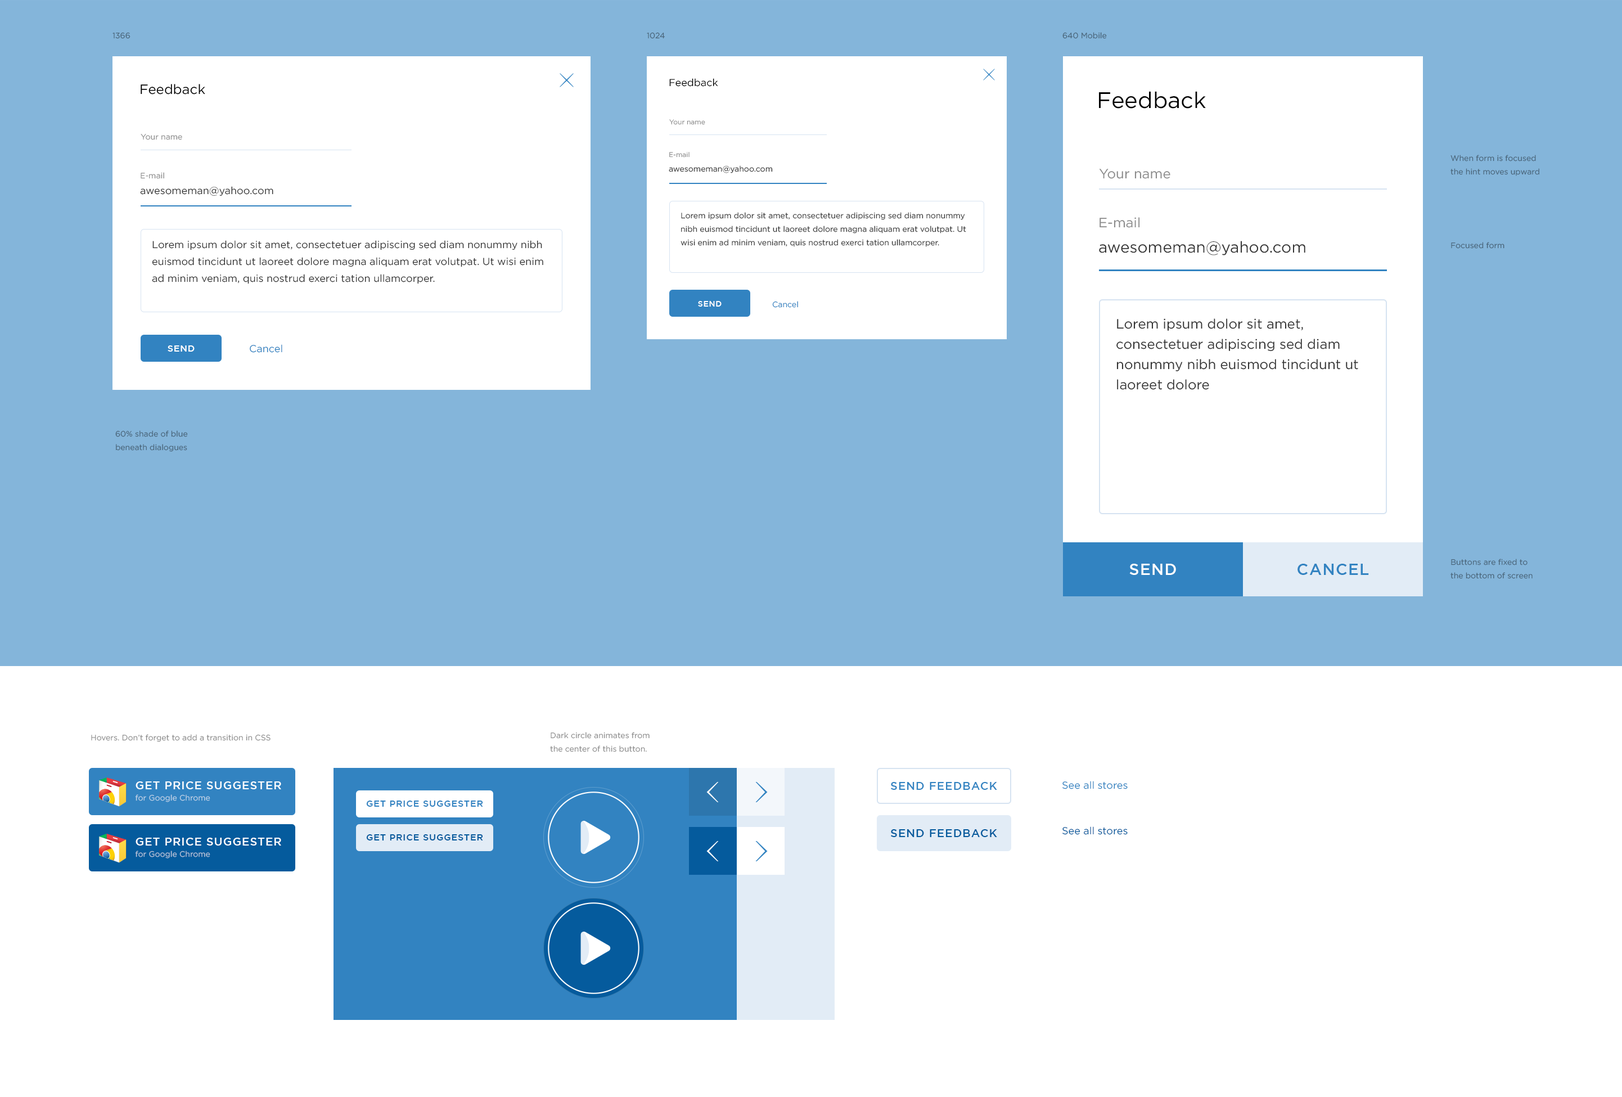
<style>
.page{position:relative;width:1622px;height:1097px;background:#ffffff}
.page>*{position:absolute;margin:0}
.t1{font:7.9px "GothamPro";color:#486377}
.t2{font:13.5px "GothamPro";color:#000000}
.t3{font:10.1px "GothamPro";color:#000000}
.t4{font:22.5px "GothamPro";color:#000000}
.t5{font:6.8px "GothamPro";color:#8b8b8b}
.t6{font:7.9px "GothamPro";color:#8b8b8b}
.t7{font:7.9px/13.5px "GothamPro";color:#486377}
.t8{font:7.9px "GothamPro";color:#333333}
.t9{font:13.5px "GothamPro";color:#8b8b8b}
.t10{font:10.1px "GothamPro";color:#333333}
.t11{font:7.9px/13.5px "GothamPro";color:#333333}
.t12{font:10.1px/16.9px "GothamPro";color:#333333}
.t13{font:15.8px "GothamPro";color:#333333}
.t14{font:7.9px "GothamPro-Medium";letter-spacing:0.05em;color:#ffffff;text-transform:uppercase}
.t15{font:7.9px "GothamPro";color:#3283c1}
.t16{font:13.5px/20.2px "GothamPro";color:#333333}
.t17{font:9px "GothamPro-Medium";letter-spacing:0.05em;color:#ffffff;text-transform:uppercase}
.t18{font:10.1px "GothamPro";color:#3283c1}
.t19{font:15.8px "GothamPro-Medium";letter-spacing:0.05em;color:#ffffff;text-transform:uppercase}
.t20{font:15.8px "GothamPro-Medium";letter-spacing:0.05em;color:#3283c1;text-transform:uppercase}
.t21{font:7.9px/13.5px "GothamPro";color:#8b8b8b}
.t22{font:11.2px "GothamPro-Medium";letter-spacing:0.05em;color:#ffffff;text-transform:uppercase}
.t23{font:11.2px "GothamPro-Medium";letter-spacing:0.05em;color:#3283c1;text-transform:uppercase}
.t24{font:7.9px "GothamPro";color:#bdd2e7}
.t25{font:9px "GothamPro-Medium";letter-spacing:0.05em;color:#3283c1;text-transform:uppercase}
.t26{font:11.2px "GothamPro-Medium";letter-spacing:0.05em;color:#055b9d;text-transform:uppercase}
.t27{font:10.1px "GothamPro";color:#055b9d}
.t28{font:9px "GothamPro-Medium";letter-spacing:0.05em;color:#055b9d;text-transform:uppercase}
.t29{font:7.9px "GothamPro";color:#b6c6db}
</style>
<div class="page">
<p class="t1" style="left:112px;top:32px;width:18px;height:7px">1366</p>
<p class="t1" style="left:647px;top:32px;width:18px;height:7px">1024</p>
<p class="t1" style="left:1063px;top:32px;width:44px;height:7px">640 Mobile</p>
<p class="t2" style="left:141px;top:84px;width:64px;height:10px">Feedback</p>
<p class="t3" style="left:669px;top:78px;width:49px;height:9px">Feedback</p>
<p class="t4" style="left:1099px;top:91px;width:107px;height:18px">Feedback</p>
<p class="t5" style="left:669px;top:119px;width:36px;height:6px">Your name</p>
<p class="t6" style="left:141px;top:134px;width:41px;height:6px">Your name</p>
<p class="t5" style="left:669px;top:152px;width:21px;height:6px">E-mail</p>
<p class="t7" style="left:1451px;top:155px;width:89px;height:21px">When form is focused<br>the hint moves upward</p>
<p class="t6" style="left:141px;top:172px;width:23px;height:7px">E-mail</p>
<p class="t8" style="left:669px;top:165px;width:104px;height:8px">awesomeman@yahoo.com</p>
<p class="t9" style="left:1099px;top:169px;width:72px;height:10px">Your name</p>
<p class="t10" style="left:140px;top:186px;width:133px;height:10px">awesomeman@yahoo.com</p>
<p class="t11" style="left:681px;top:212px;width:285px;height:35px">Lorem ipsum dolor sit amet, consectetuer adipiscing sed diam nonummy nibh euismod tincidunt ut laoreet dolore magna aliquam erat volutpat. Ut wisi enim ad minim veniam, quis nostrud exerci tation ullamcorper.</p>
<p class="t9" style="left:1100px;top:217px;width:40px;height:11px">E-mail</p>
<p class="t12" style="left:152px;top:240px;width:391px;height:44px">Lorem ipsum dolor sit amet, consectetuer adipiscing sed diam nonummy nibh euismod tincidunt ut laoreet dolore magna aliquam erat volutpat. Ut wisi enim ad minim veniam, quis nostrud exerci tation ullamcorper.</p>
<p class="t13" style="left:1099px;top:241px;width:207px;height:14px">awesomeman@yahoo.com</p>
<p class="t1" style="left:1451px;top:242px;width:54px;height:7px">Focused form</p>
<p class="t14" style="left:698px;top:301px;width:24px;height:6px">Send</p>
<p class="t15" style="left:772px;top:301px;width:26px;height:7px">Cancel</p>
<p class="t16" style="left:1117px;top:318px;width:241px;height:72px">Lorem ipsum dolor sit amet,<br>consectetuer adipiscing sed diam<br>nonummy nibh euismod tincidunt ut<br>laoreet dolore</p>
<p class="t17" style="left:168px;top:345px;width:27px;height:7px">Send</p>
<p class="t18" style="left:250px;top:344px;width:32px;height:9px">Cancel</p>
<p class="t7" style="left:115px;top:430px;width:73px;height:22px">60% shade of blue<br>beneath dialogues</p>
<p class="t19" style="left:1130px;top:564px;width:46px;height:11px">SEND</p>
<p class="t20" style="left:1298px;top:564px;width:71px;height:11px">Cancel</p>
<p class="t7" style="left:1451px;top:559px;width:82px;height:20px">Buttons are fixed to<br>the bottom of screen</p>
<p class="t6" style="left:91px;top:734px;width:180px;height:8px">Hovers. Don’t forget to add a transition in CSS</p>
<p class="t21" style="left:550px;top:732px;width:100px;height:20px">Dark circle animates from<br>the center of this button.</p>
<p class="t22" style="left:136px;top:781px;width:145px;height:8px">Get Price Suggester</p>
<p class="t23" style="left:891px;top:782px;width:106px;height:8px">SEND FEEDBACK</p>
<p class="t18" style="left:1063px;top:781px;width:65px;height:8px">See all stores</p>
<p class="t24" style="left:135px;top:794px;width:75px;height:8px">for Google Chrome</p>
<p class="t25" style="left:366px;top:800px;width:117px;height:7px">Get price suggester</p>
<p class="t26" style="left:891px;top:829px;width:106px;height:8px">SEND FEEDBACK</p>
<p class="t27" style="left:1063px;top:826px;width:65px;height:9px">See all stores</p>
<p class="t22" style="left:136px;top:838px;width:145px;height:7px">Get Price Suggester</p>
<p class="t28" style="left:366px;top:834px;width:117px;height:6px">Get price suggester</p>
<p class="t29" style="left:135px;top:850px;width:75px;height:8px">for Google Chrome</p>
</div>
